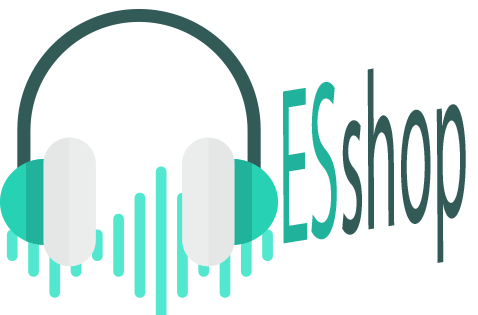
<style>
.page{position:relative;width:478px;height:315px;background:#ffffff}
.page>*{position:absolute;margin:0}
.t1{font:224.9px "MyriadPro-Regular";color:#325b58;scale:0.28 1}
.t2{font:224.9px "MyriadPro-Regular";color:#20b29a;scale:0.28 1}
</style>
<div class="page">
<p class="t1" style="left:283px;top:68px;width:183px;height:195px;rotate:-9deg"><span class="t2">ES</span>shop</p>
</div>
